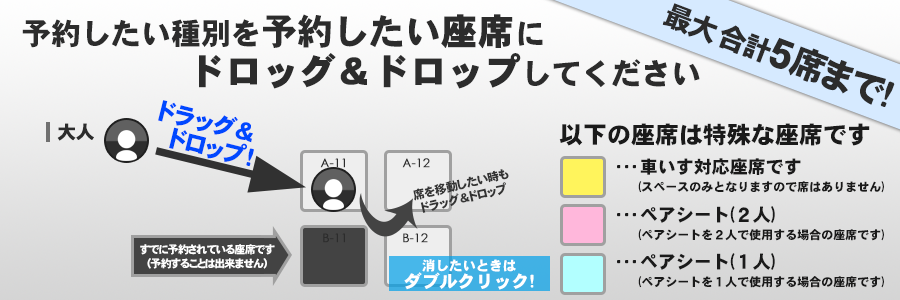
<style>
.page{position:relative;width:900px;height:300px}
.page>*{position:absolute;margin:0}
.t1{font:36px "HGHeiseiKakugothictaiW9";color:#2c2c2c}
.t2{font:28px "HGHeiseiKakugothictaiW9";color:#2c2c2c}
.t3{font:36px/40px "HGHeiseiKakugothictaiW9";color:#2c2c2c;font-weight:bold}
.t4{font:30px/40px "HGHeiseiKakugothictaiW9";color:#2c2c2c}
.t5{font:36px/40px "HGHeiseiKakugothictaiW9";color:#2c2c2c}
.t6{font:24px/24px "HGSHeiseiKakugothictaiW9";color:#0048ff}
.t7{font:18px "HGHeiseiKakugothictaiW9";color:#2c2c2c;font-weight:bold}
.t8{font:24px "HGSHeiseiKakugothictaiW9";color:#1a1a1a}
.t9{font:12px "CenturyGothic";color:#2c2c2c;font-weight:bold}
.t10{font:12px/18px "HGSHeiseiKakugothictaiW9";color:#1a1a1a}
.t11{font:18px/18px "HGSHeiseiKakugothictaiW9";color:#1a1a1a}
.t12{font:12px/14px "HGSHeiseiKakugothictaiW9";color:#343434}
.t13{font:11px/14px "HGSHeiseiKakugothictaiW9";color:#ffffff}
.t14{font:17.9px/13.4px "HGSHeiseiKakugothictaiW9";color:#ffffff}
.t15{font:13.4px/13.4px "HGSHeiseiKakugothictaiW9";color:#ffffff}
</style>
<div class="page">
<p class="t1" style="left:662px;top:3px;width:233px;height:104px;rotate:21deg"><span class="t2">最大合計</span>５席まで!</p>
<p class="t3" style="left:22px;top:14px;width:678px;height:75px;text-align:center"><span class="t4">予約したい種別を</span><span class="t5">予約したい</span>座席<span class="t4">に<br>　　　　　　　　　</span>ドロッグ＆ドロップ<span class="t4">してください</span></p>
<p class="t6" style="left:158px;top:100px;width:96px;height:67px;text-align:center;rotate:14deg">ドラッグ＆<br>　ドロップ！</p>
<p class="t7" style="left:57px;top:123px;width:37px;height:18px">大人</p>
<p class="t8" style="left:559px;top:123px;width:311px;height:23px">以下の座席は特殊な座席です</p>
<p class="t9" style="left:320px;top:158px;width:110px;height:10px">A-11               A-12</p>
<p class="t10" style="left:617px;top:158px;width:267px;height:35px"><span class="t11">･･･車いす対応座席です<br>　</span> (スペースのみとなりますので席はありません)</p>
<p class="t12" style="left:413px;top:169px;width:96px;height:44px;text-align:center;rotate:-13deg">席を移動したい時も<br>ドラッグ＆ドロップ</p>
<p class="t10" style="left:617px;top:206px;width:267px;height:35px"><span class="t11">･･･ペアシート(２人)<br>　</span> (ペアシートを２人で使用する場合の座席です)</p>
<p class="t13" style="left:140px;top:244px;width:135px;height:25px;text-align:center">すでに予約されている座席です<br>（予約することは出来ません）</p>
<p class="t10" style="left:617px;top:253px;width:267px;height:35px"><span class="t11">･･･ペアシート(１人)<br>　</span> (ペアシートを１人で使用する場合の座席です)</p>
<p class="t14" style="left:404px;top:259px;width:130px;height:31px;text-align:center"><span class="t15">消したいときは<br></span>ダブルクリック!</p>
</div>
